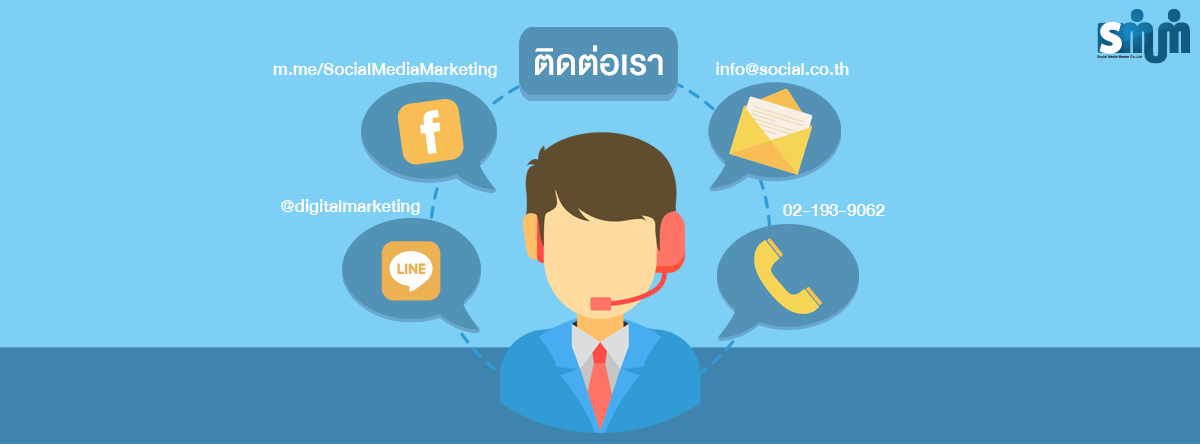
<style>
.page{position:relative;width:1200px;height:444px;background:#7dcff5}
.page>*{position:absolute;margin:0}
.t1{font:50px "DBHeavent-Med";color:#ffffff}
.t2{font:25px "DBHeavent-Med";color:#ffffff}
</style>
<div class="page">
<p class="t1" style="left:535px;top:45px;width:128px;height:31px">ติดต่อเรา</p>
<p class="t2" style="left:273px;top:62px;width:224px;height:16px">m.me/SocialMediaMarketing</p>
<p class="t2" style="left:716px;top:62px;width:133px;height:13px">info@social.co.th</p>
<p class="t2" style="left:281px;top:199px;width:139px;height:16px">@digitalmarketing</p>
<p class="t2" style="left:783px;top:204px;width:102px;height:12px">02-193-9062</p>
</div>
